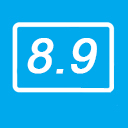
<style>
.page{position:relative;width:128px;height:128px;background:#00a9ec}
.page>*{position:absolute;margin:0}
.t1{font:48px "ArialMT";color:#ffffff;font-weight:bold;font-style:italic}
</style>
<div class="page">
<p class="t1" style="left:27px;top:38px;width:70px;height:36px">8.9</p>
</div>
